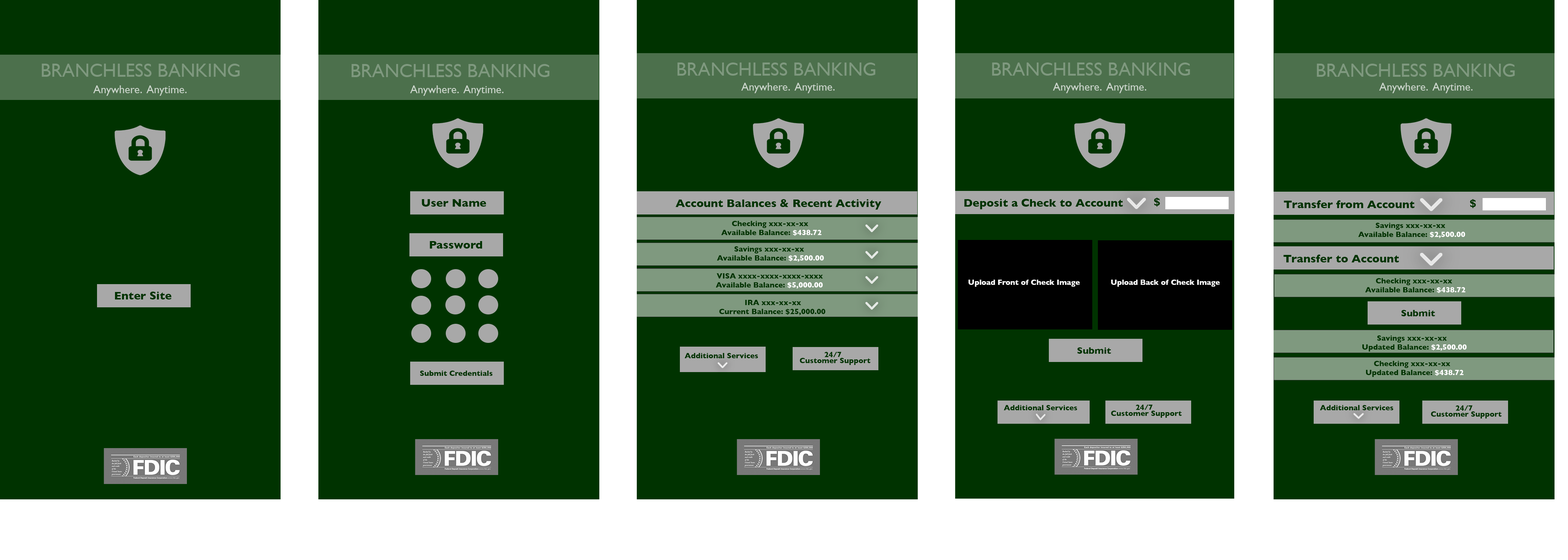
<style>
.page{position:relative;width:1568px;height:560px;background:#003300}
.page>*{position:absolute;margin:0}
.t1{font:18.7px "GillSans";color:#7f997f}
.t2{font:11.2px "GillSans";color:#ccd6cc}
.t3{font:11.2px "GillSans-Bold";color:#003300}
.t4{font:7.5px "GillSans-Bold";color:#003300}
.t5{font:7.5px "GillSans-Bold";color:#ffffff}
.t6{font:9.4px "GillSans-Bold";color:#003300}
.t7{font:7.5px/6px "GillSans-Bold";color:#003300}
</style>
<div class="page">
<p class="t1" style="left:42px;top:64px;width:198px;height:13px">BRANCHLESS BANKING</p>
<p class="t1" style="left:351px;top:64px;width:199px;height:13px">BRANCHLESS BANKING</p>
<p class="t1" style="left:677px;top:63px;width:198px;height:13px">BRANCHLESS BANKING</p>
<p class="t1" style="left:992px;top:63px;width:198px;height:13px">BRANCHLESS BANKING</p>
<p class="t1" style="left:1317px;top:64px;width:198px;height:13px">BRANCHLESS BANKING</p>
<p class="t2" style="left:93px;top:85px;width:94px;height:11px">Anywhere.  Anytime.</p>
<p class="t2" style="left:410px;top:85px;width:93px;height:11px">Anywhere.  Anytime.</p>
<p class="t2" style="left:741px;top:83px;width:94px;height:10px">Anywhere.  Anytime.</p>
<p class="t2" style="left:1053px;top:83px;width:93px;height:10px">Anywhere.  Anytime.</p>
<p class="t2" style="left:1379px;top:83px;width:93px;height:10px">Anywhere.  Anytime.</p>
<p class="t3" style="left:1154px;top:198px;width:6px;height:9px">$</p>
<p class="t3" style="left:422px;top:199px;width:64px;height:8px">User Name</p>
<p class="t3" style="left:675px;top:199px;width:206px;height:11px">Account Balances &amp; Recent Activity</p>
<p class="t3" style="left:964px;top:199px;width:159px;height:10px">Deposit a Check to Account</p>
<p class="t3" style="left:1284px;top:200px;width:130px;height:8px">Transfer from Account</p>
<p class="t3" style="left:1470px;top:199px;width:6px;height:9px">$</p>
<p class="t4" style="left:721px;top:221px;width:100px;height:15px;text-align:right">Checking xxx-xx-xx           <br>Available Balance: <span class="t5">$438.72</span></p>
<p class="t4" style="left:1358px;top:223px;width:107px;height:15px;text-align:right">Savings xxx-xx-xx              <br>Available Balance: <span class="t5">$2,500.00</span></p>
<p class="t3" style="left:430px;top:241px;width:52px;height:8px">Password</p>
<p class="t4" style="left:717px;top:246px;width:107px;height:16px;text-align:right">Savings xxx-xx-xx              <br>Available Balance: <span class="t5">$2,500.00</span></p>
<p class="t3" style="left:1283px;top:255px;width:116px;height:8px">Transfer to Account</p>
<p class="t4" style="left:716px;top:273px;width:107px;height:16px;text-align:right">VISA xxxx-xxxx-xxxx-xxxx           <br>Available Balance: <span class="t5">$5,000.00</span></p>
<p class="t5" style="left:968px;top:280px;width:112px;height:7px">Upload Front of Check Image</p>
<p class="t5" style="left:1111px;top:280px;width:109px;height:7px">Upload Back of Check Image</p>
<p class="t4" style="left:1365px;top:278px;width:100px;height:15px;text-align:right">Checking xxx-xx-xx           <br>Available Balance: <span class="t5">$438.72</span></p>
<p class="t3" style="left:115px;top:292px;width:57px;height:8px">Enter Site</p>
<p class="t4" style="left:719px;top:300px;width:107px;height:15px;text-align:right">IRA xxx-xx-xx                      <br>Current Balance: $25,000.00</p>
<p class="t6" style="left:1401px;top:310px;width:34px;height:7px">Submit</p>
<p class="t4" style="left:1362px;top:336px;width:105px;height:16px;text-align:right">Savings xxx-xx-xx              <br>Updated Balance: <span class="t5">$2,500.00</span></p>
<p class="t4" style="left:684px;top:353px;width:74px;height:5px">Additional Services</p>
<p class="t7" style="left:800px;top:352px;width:71px;height:13px;text-align:right">24/7             <br> Customer Support</p>
<p class="t6" style="left:1077px;top:348px;width:34px;height:6px">Submit</p>
<p class="t4" style="left:1366px;top:361px;width:97px;height:16px;text-align:right">Checking xxx-xx-xx           <br>Updated Balance: <span class="t5">$438.72</span></p>
<p class="t4" style="left:420px;top:371px;width:73px;height:5px">Submit Credentials</p>
<p class="t4" style="left:1004px;top:405px;width:73px;height:6px">Additional Services</p>
<p class="t7" style="left:1111px;top:405px;width:71px;height:13px;text-align:right">24/7             <br> Customer Support</p>
<p class="t4" style="left:1320px;top:405px;width:73px;height:6px">Additional Services</p>
<p class="t7" style="left:1431px;top:406px;width:71px;height:13px;text-align:right">24/7             <br> Customer Support</p>
</div>
